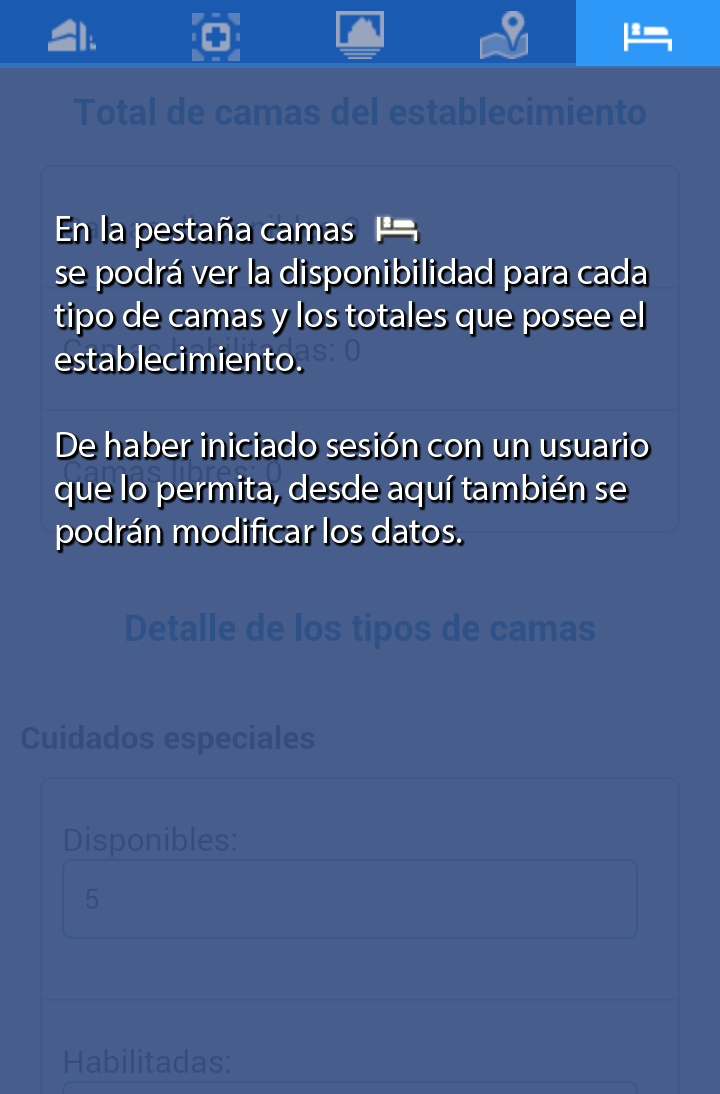
<style>
.page{position:relative;width:720px;height:1094px;background:#475e8c}
.page>*{position:absolute;margin:0}
.t1{font:36px "MyriadPro-Regular";color:#ffffff}
</style>
<div class="page">
<p class="t1" style="left:54px;top:215px;width:595px;height:335px">En la pestaña camas<br>se podrá ver la disponibilidad para cada<br>tipo de camas y los totales que posee el<br>establecimiento.<br><br>De haber iniciado sesión con un usuario<br>que lo permita, desde aquí también se<br>podrán modificar los datos.</p>
</div>
